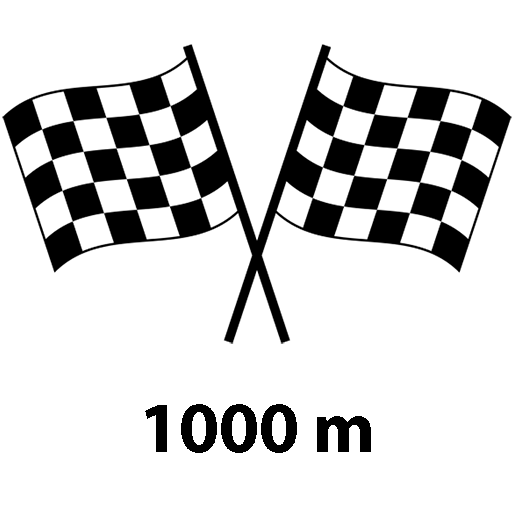
<style>
.page{position:relative;width:512px;height:512px;background:#ffffff}
.page>*{position:absolute;margin:0}
.t1{font:72px "MyriadPro-Bold";color:#000000}
</style>
<div class="page">
<p class="t1" style="left:145px;top:404px;width:226px;height:49px">1000 m</p>
</div>
